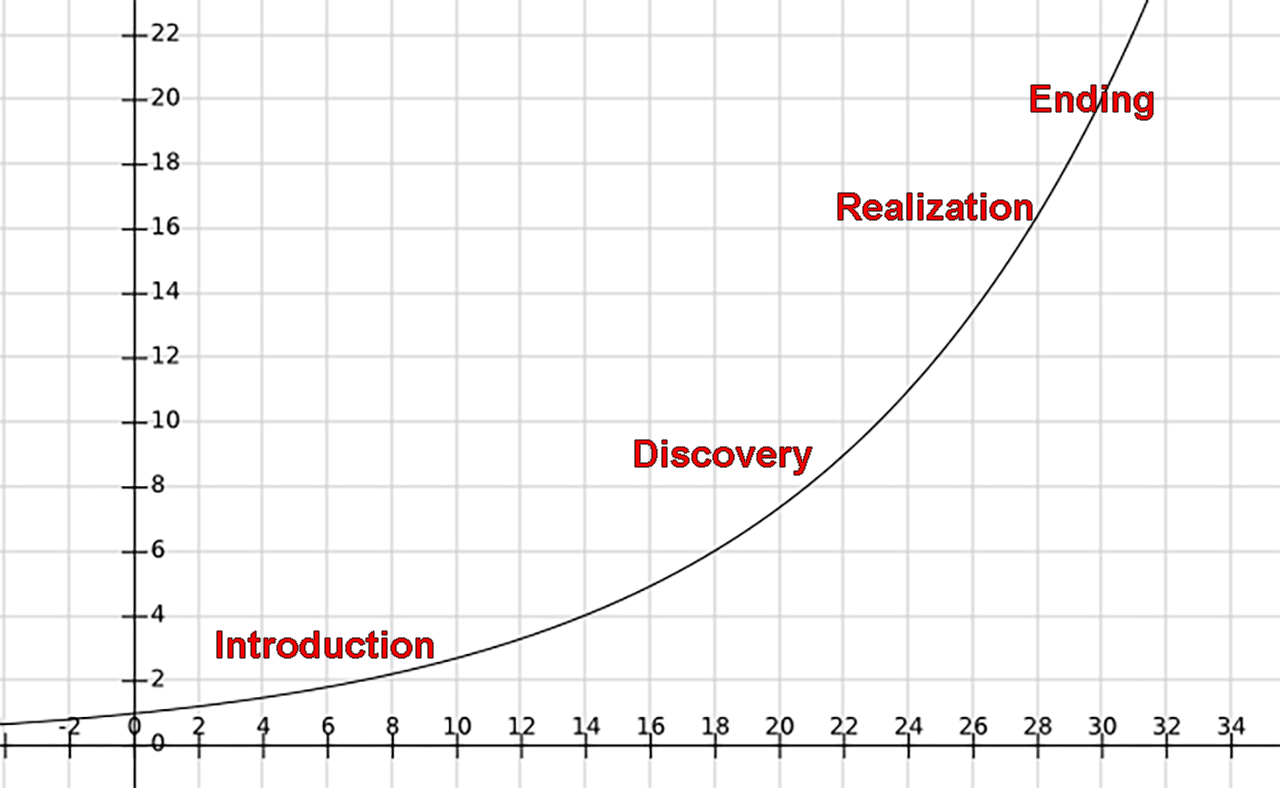
<style>
.page{position:relative;width:1280px;height:788px;background:#ffffff}
.page>*{position:absolute;margin:0}
.t1{font:37.5px "Arial-BoldMT"}
</style>
<div class="page">
<p class="t1" style="left:1031px;top:85px;width:122px;height:35px">Ending</p>
<p class="t1" style="left:838px;top:193px;width:194px;height:27px">Realization</p>
<p class="t1" style="left:635px;top:440px;width:177px;height:35px">Discovery</p>
<p class="t1" style="left:217px;top:631px;width:216px;height:27px">Introduction</p>
</div>
